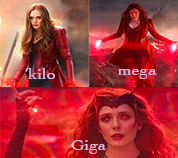
<style>
.page{position:relative;width:178px;height:158px}
.page>*{position:absolute;margin:0}
.t1{font:15.8px "Cochin";color:#e5bde7;scale:1.13 1}
</style>
<div class="page">
<p class="t1" style="left:28px;top:68px;width:27px;height:11px">kilo</p>
<p class="t1" style="left:117px;top:69px;width:40px;height:10px">mega</p>
<p class="t1" style="left:71px;top:140px;width:36px;height:14px">Giga</p>
</div>
